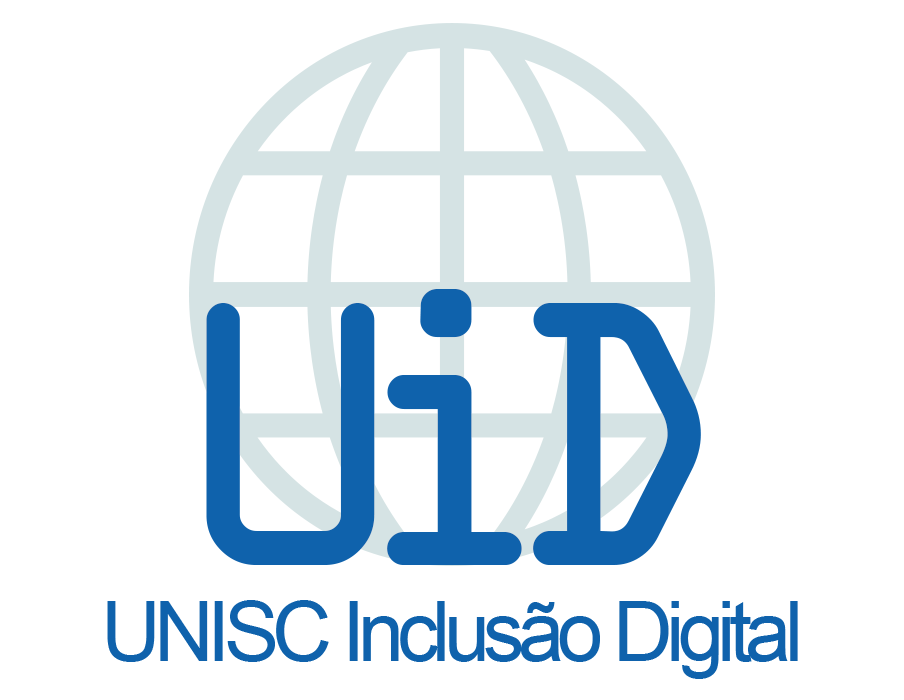
<style>
.page{position:relative;width:904px;height:700px;background:#ffffff}
.page>*{position:absolute;margin:0}
.t1{font:404.5px "OCRAExtended";letter-spacing:-0.2em;color:#0f62ac}
.t2{font:375.8px "OCRAExtended";color:#c3c3c3}
.t3{font:82.6px "ArialMT";letter-spacing:-0.08em;color:#0f62ac}
.t4{font:396.4px "OCRAExtended";color:#c3c3c3}
</style>
<div class="page">
<p class="t1" style="left:206px;top:289px;width:495px;height:276px"><span class="t2"><br></span>UiD</p>
<p class="t3" style="left:107px;top:600px;width:691px;height:79px"><span class="t4"><br></span>UNISC Inclusão Digital</p>
</div>
